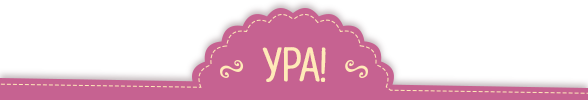
<style>
.page{position:relative;width:588px;height:100px;background:#ffffff}
.page>*{position:absolute;margin:0}
.t1{font:48px "IntroHeadR-Base";letter-spacing:-0.05em;color:#fae9b9;font-weight:bold}
</style>
<div class="page">
<p class="t1" style="left:262px;top:47px;width:64px;height:35px">УРА!</p>
</div>
